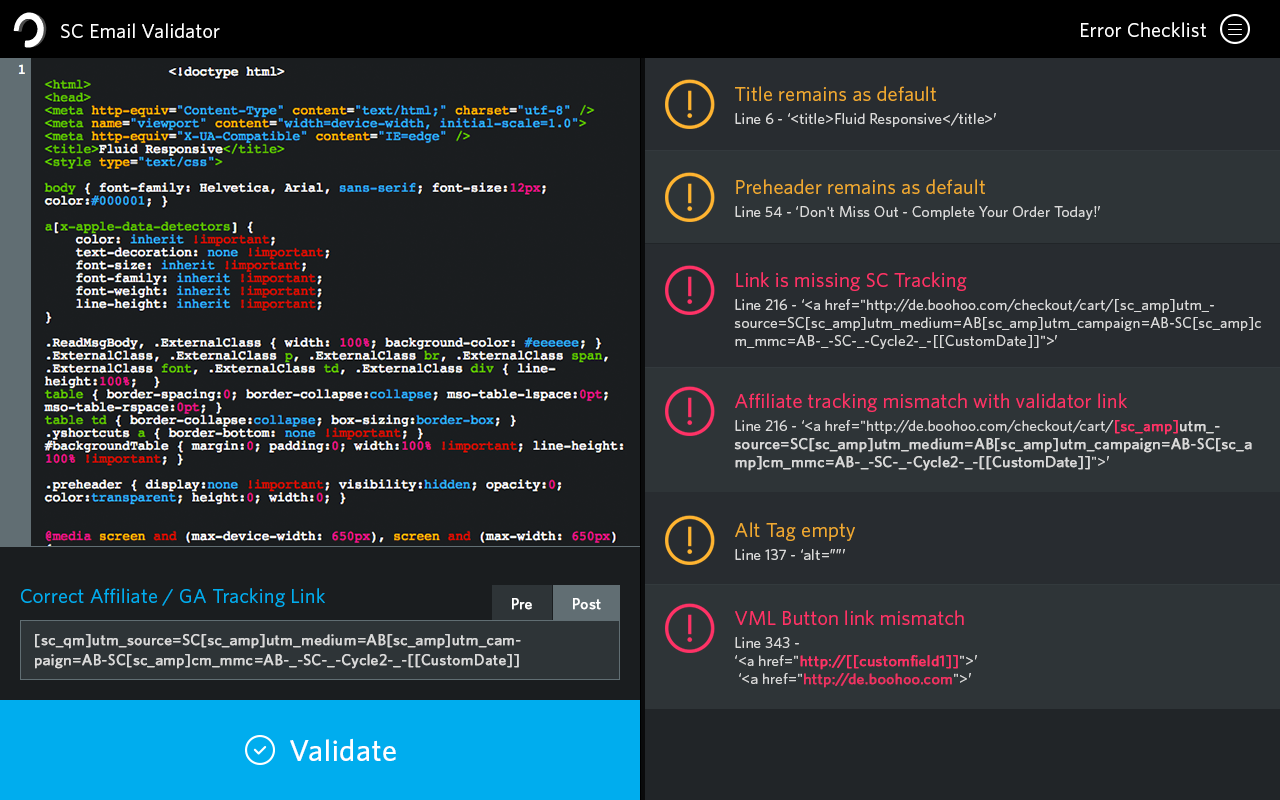
<style>
.page{position:relative;width:1280px;height:800px;background:#2e3437}
.page>*{position:absolute;margin:0}
.t1{font:20px "Whitney-Book";letter-spacing:0.02em;color:#ffffff}
.t2{font:15px "Whitney-Book";letter-spacing:0.02em;color:#d9d9d9}
.t3{font:20px "Whitney-Book";letter-spacing:0.02em;color:#efa930}
.t4{font:20px "Whitney-Book";letter-spacing:0.02em;color:#ff3266}
.t5{font:15px "Whitney-Book";letter-spacing:0.02em;color:#d9d9d9;font-weight:bold}
.t6{font:15px "Whitney-Book";letter-spacing:0.02em;color:#ff3266;font-weight:bold}
.t7{font:20px "Whitney-Book";letter-spacing:0.02em;color:#00adee}
.t8{font:15px "Whitney-Book";letter-spacing:0.02em;color:#ffffff;font-weight:bold}
.t9{font:15px "Whitney-Book";letter-spacing:0.02em;color:#ef3262;font-weight:bold}
.t10{font:15px/20px "Whitney-Book";letter-spacing:0.02em;color:#d9d9d9;font-weight:bold}
.t11{font:30px "Whitney-Medium";letter-spacing:0.02em;color:#ffffff}
</style>
<div class="page">
<p class="t1" style="left:61px;top:23px;width:159px;height:15px">SC Email Validator</p>
<p class="t1" style="left:1081px;top:22px;width:125px;height:15px">Error Checklist</p>
<p class="t2" style="left:735px;top:86px;width:261px;height:41px"><span class="t3">Title remains as default<br></span>Line 6 - ‘&lt;title&gt;Fluid Responsive&lt;/title&gt;’</p>
<p class="t2" style="left:735px;top:179px;width:365px;height:41px"><span class="t3">Preheader remains as default <br></span>Line 54 - ‘Don't Miss Out - Complete Your Order Today!’</p>
<p class="t2" style="left:734px;top:272px;width:527px;height:77px"><span class="t4">Link is missing SC Tracking<br></span>Line 216 - ‘&lt;a href="http://de.boohoo.com/checkout/cart/[sc_amp]utm_source=SC[sc_amp]utm_medium=AB[sc_amp]utm_campaign=AB-SC[sc_amp]cm_mmc=AB-_-SC-_-Cycle2-_-[[CustomDate]]"&gt;’</p>
<p class="t5" style="left:734px;top:393px;width:518px;height:78px"><span class="t4">Affiliate tracking mismatch with validator link<br></span><span class="t2">Line 216 - ‘&lt;a href="http://de.boohoo.com/checkout/cart/</span><span class="t6">[sc_amp]</span>utm_source=SC[sc_amp]utm_medium=AB[sc_amp]utm_campaign=AB-SC[sc_amp]cm_mmc=AB-_-SC-_-Cycle2-_-[[CustomDate]]<span class="t2">"&gt;’</span></p>
<p class="t2" style="left:735px;top:522px;width:120px;height:38px"><span class="t3">Alt Tag empty<br></span>Line 137 - ‘alt=””’</p>
<p class="t7" style="left:21px;top:588px;width:304px;height:19px">Correct Affiliate / GA Tracking Link</p>
<p class="t8" style="left:512px;top:598px;width:20px;height:12px">Pre</p>
<p class="t8" style="left:573px;top:598px;width:28px;height:12px">Post</p>
<p class="t4" style="left:735px;top:610px;width:242px;height:78px">VML Button link mismatch<br><span class="t2">Line 343 - <br>‘&lt;a href="</span><span class="t6">http://[[customfield1]]</span><span class="t2">"&gt;’<br> ‘&lt;a href="</span><span class="t9">http://de.boohoo.com</span><span class="t2">"&gt;’</span></p>
<p class="t10" style="left:35px;top:634px;width:486px;height:35px">[sc_qm]utm_source=SC[sc_amp]utm_medium=AB[sc_amp]utm_campaign=AB-SC[sc_amp]cm_mmc=AB-_-SC-_-Cycle2-_-[[CustomDate]]</p>
<p class="t11" style="left:290px;top:738px;width:106px;height:23px">Validate</p>
</div>
